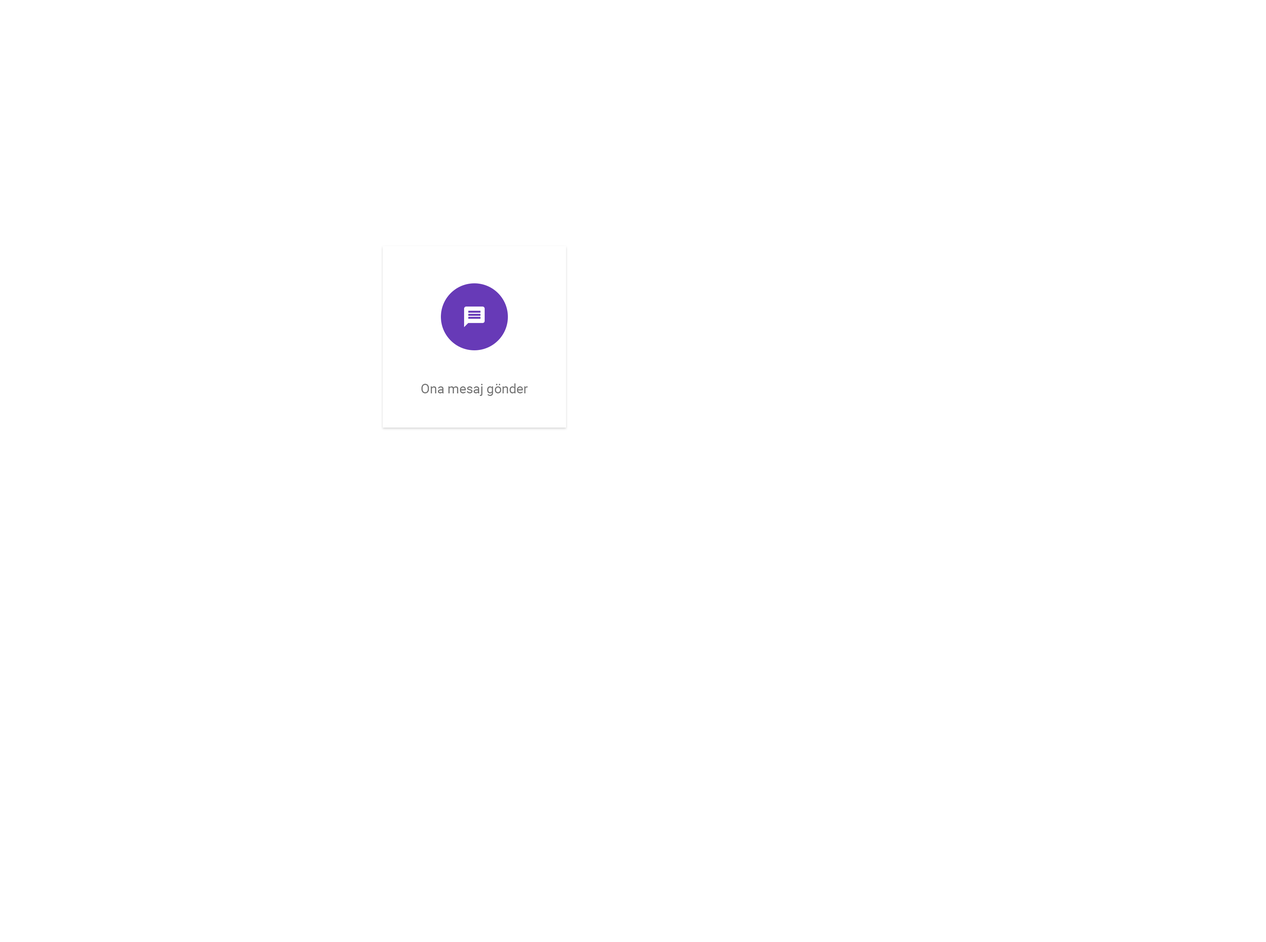
<style>
.page{position:relative;width:1266px;height:942px;background:#ffffff}
.page>*{position:absolute;margin:0}
.t1{font:13.2px "Roboto-Regular";color:#757575}
</style>
<div class="page">
<p class="t1" style="left:421px;top:383px;width:107px;height:13px">Ona mesaj gönder</p>
</div>
